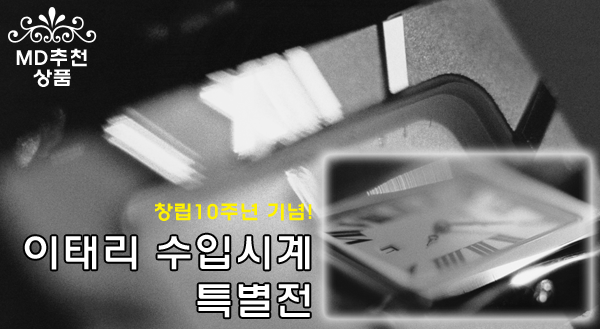
<style>
.page{position:relative;width:600px;height:329px}
.page>*{position:absolute;margin:0}
.t1{font:20px/20.1px "HYwulB";color:#ffffff}
.t2{font:20px "HYwulB";color:#fff200}
.t3{font:40px "HYwulM";color:#ffffff}
</style>
<div class="page">
<p class="t1" style="left:16px;top:48px;width:71px;height:39px;text-align:center">MD추천<br>상품</p>
<p class="t2" style="left:155px;top:202px;width:157px;height:19px">창립10주년 기념!</p>
<p class="t3" style="left:24px;top:234px;width:286px;height:84px;text-align:right">이태리 수입시계<br>특별전</p>
</div>
